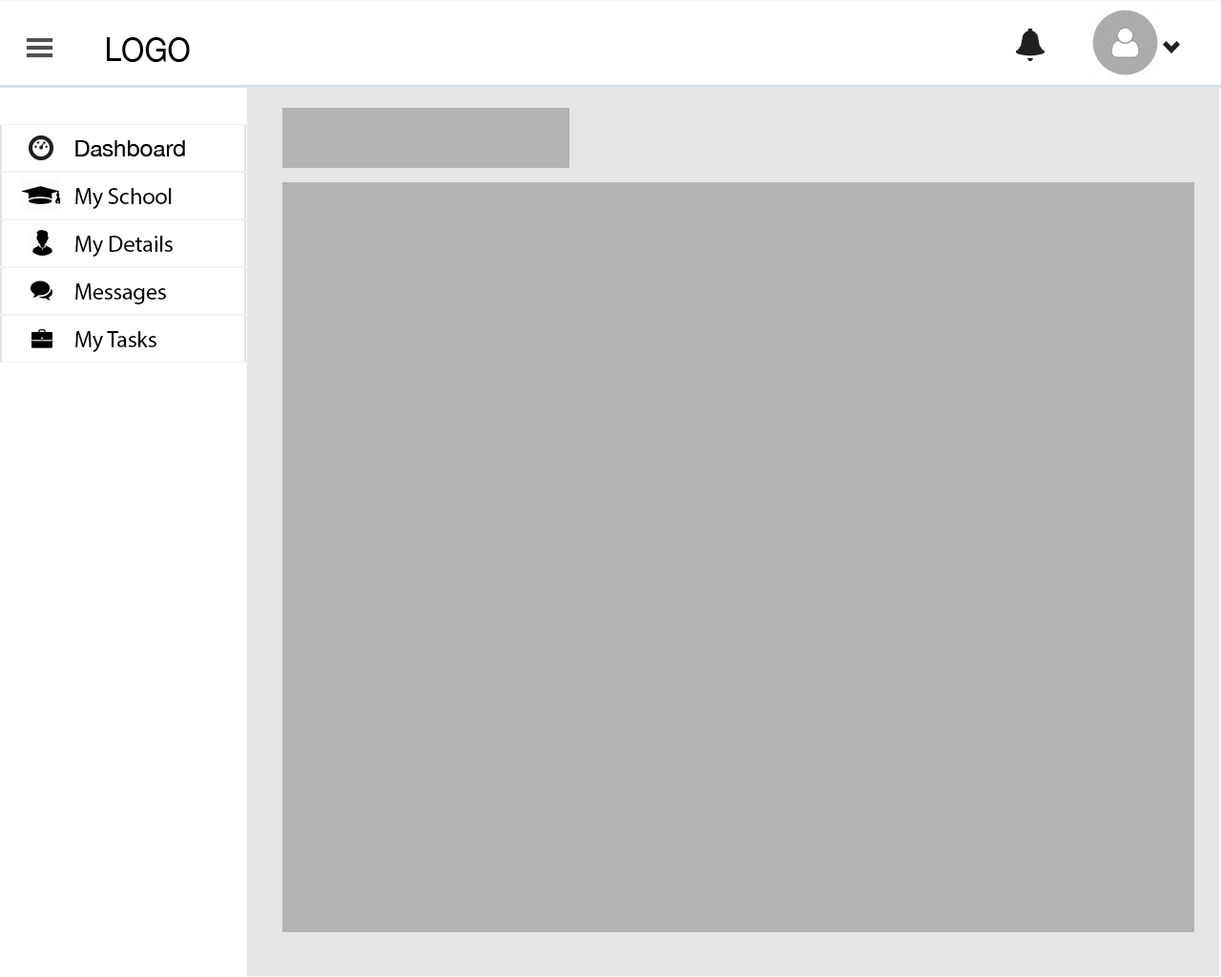
<style>
.page{position:relative;width:1221px;height:977px;background:#b3b3b3}
.page>*{position:absolute;margin:0}
.t1{font:32.7px "HelveticaNeue";color:#000000;scale:0.93 1}
.t2{font:22.9px "HelveticaNeue";color:#000000}
.t3{font:22.9px "MyriadPro-Regular";color:#000000}
</style>
<div class="page">
<p class="t1" style="left:107px;top:37px;width:83px;height:25px">LOGO</p>
<p class="t2" style="left:75px;top:140px;width:110px;height:16px">Dashboard</p>
<p class="t3" style="left:75px;top:188px;width:97px;height:21px">My School</p>
<p class="t3" style="left:75px;top:236px;width:98px;height:21px">My Details</p>
<p class="t3" style="left:75px;top:283px;width:91px;height:21px">Messages</p>
<p class="t3" style="left:75px;top:331px;width:81px;height:21px">My Tasks</p>
</div>
